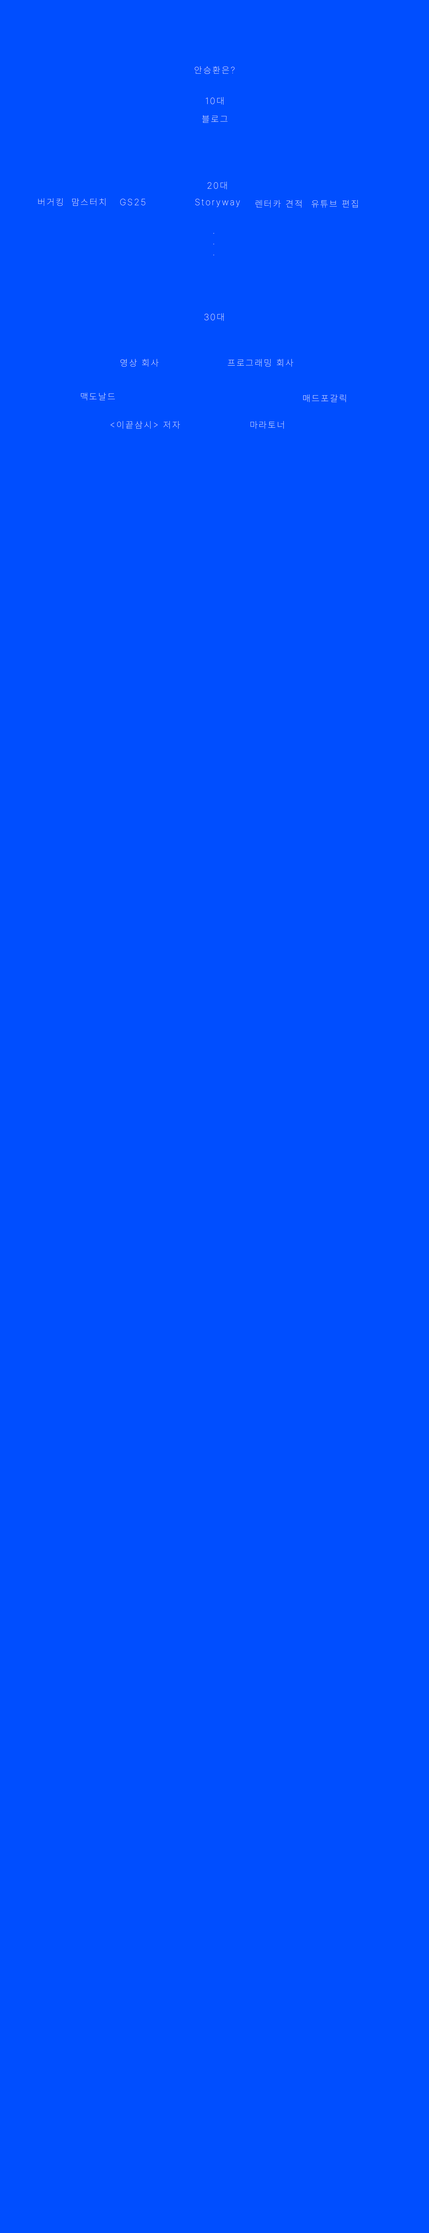
<style>
.page{position:relative;width:429px;height:2233px;background:#004eff}
.page>*{position:absolute;margin:0}
.t1{font:9px "Pretendard-Thin";letter-spacing:0.15em;color:#ffffff}
</style>
<div class="page">
<p class="t1" style="left:195px;top:66px;width:40px;height:8px">안승환은?</p>
<p class="t1" style="left:206px;top:97px;width:17px;height:8px">10대</p>
<p class="t1" style="left:202px;top:115px;width:25px;height:8px">블로그</p>
<p class="t1" style="left:207px;top:182px;width:20px;height:7px">20대</p>
<p class="t1" style="left:38px;top:198px;width:25px;height:8px">버거킹</p>
<p class="t1" style="left:72px;top:198px;width:33px;height:8px">맘스터치</p>
<p class="t1" style="left:120px;top:199px;width:25px;height:6px">GS25</p>
<p class="t1" style="left:195px;top:199px;width:45px;height:8px">Storyway</p>
<p class="t1" style="left:255px;top:200px;width:46px;height:8px">렌터카 견적</p>
<p class="t1" style="left:311px;top:200px;width:47px;height:8px">유튜브 편집</p>
<p class="t1" style="left:213px;top:233px;width:1px;height:22px;text-align:center">.<br>.<br>.</p>
<p class="t1" style="left:204px;top:313px;width:20px;height:8px">30대</p>
<p class="t1" style="left:120px;top:359px;width:39px;height:8px">영상 회사</p>
<p class="t1" style="left:228px;top:359px;width:65px;height:8px">프로그래밍 회사</p>
<p class="t1" style="left:81px;top:393px;width:34px;height:7px">맥도날드</p>
<p class="t1" style="left:303px;top:394px;width:43px;height:8px">매드포갈릭</p>
<p class="t1" style="left:111px;top:421px;width:69px;height:8px">&lt;이끝삼시&gt; 저자</p>
<p class="t1" style="left:250px;top:421px;width:34px;height:8px">마라토너</p>
</div>
